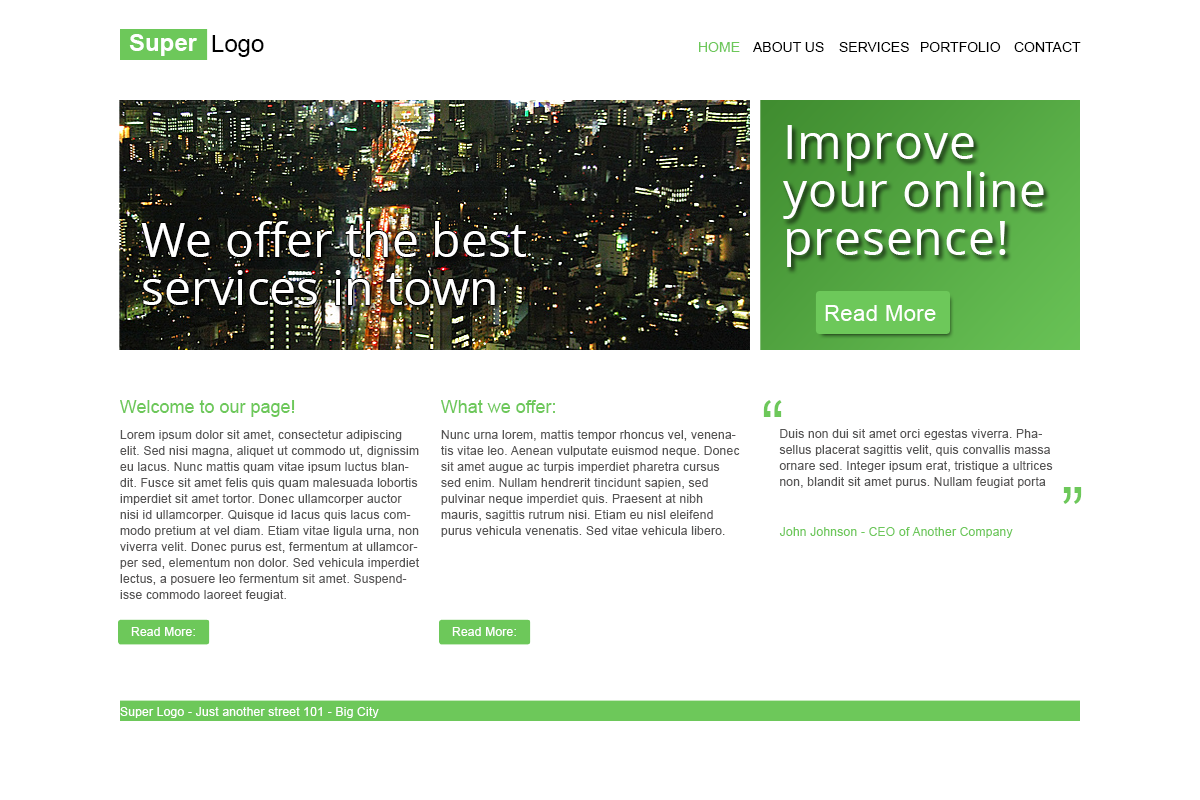
<style>
.page{position:relative;width:1200px;height:800px;background:#ffffff}
.page>*{position:absolute;margin:0}
.t1{font:24px "Arial-BoldMT";color:#ffffff}
.t2{font:24px "ArialMT";color:#000000}
.t3{font:14px "ArialMT";color:#6dc85a}
.t4{font:14px "ArialMT";color:#000000}
.t5{font:48px/48px "OpenSans";letter-spacing:0.02em;color:#ffffff}
.t6{font:48px/48px "OpenSans";color:#ffffff}
.t7{font:22px "ArialMT";letter-spacing:0.02em;color:#ffffff}
.t8{font:18px "ArialMT";color:#6dc85a}
.t9{font:70px "ArialMT";letter-spacing:0.02em;color:#6dc85a}
.t10{font:12px/16px "ArialMT";letter-spacing:0.02em;color:#565555}
.t11{font:12px "ArialMT";letter-spacing:0.02em;color:#6dc85a}
.t12{font:12px "ArialMT";letter-spacing:0.02em;color:#ffffff}
</style>
<div class="page">
<p class="t1" style="left:129px;top:34px;width:68px;height:22px">Super</p>
<p class="t2" style="left:212px;top:35px;width:52px;height:22px">Logo</p>
<p class="t3" style="left:699px;top:42px;width:41px;height:10px">HOME</p>
<p class="t4" style="left:753px;top:42px;width:71px;height:10px">ABOUT US</p>
<p class="t4" style="left:839px;top:42px;width:70px;height:10px">SERVICES</p>
<p class="t4" style="left:921px;top:42px;width:80px;height:10px">PORTFOLIO</p>
<p class="t4" style="left:1014px;top:42px;width:67px;height:10px">CONTACT</p>
<p class="t5" style="left:783px;top:125px;width:261px;height:142px">Improve your online presence!</p>
<p class="t6" style="left:141px;top:221px;width:385px;height:84px">We offer the best <br>services in town</p>
<p class="t7" style="left:825px;top:305px;width:111px;height:16px">Read More</p>
<p class="t8" style="left:120px;top:400px;width:175px;height:17px">Welcome to our page!</p>
<p class="t8" style="left:441px;top:400px;width:114px;height:13px">What we offer:</p>
<p class="t9" style="left:763px;top:400px;width:19px;height:17px">“</p>
<p class="t10" style="left:120px;top:430px;width:299px;height:171px">Lorem ipsum dolor sit amet, consectetur adipiscing elit. Sed nisi magna, aliquet ut commodo ut, dignissim eu lacus. Nunc mattis quam vitae ipsum luctus blandit. Fusce sit amet felis quis quam malesuada lobortis imperdiet sit amet tortor. Donec ullamcorper auctor nisi id ullamcorper. Quisque id lacus quis lacus commodo pretium at vel diam. Etiam vitae ligula urna, non viverra velit. Donec purus est, fermentum at ullamcorper sed, elementum non dolor. Sed vehicula imperdiet lectus, a posuere leo fermentum sit amet. Suspendisse commodo laoreet feugiat.</p>
<p class="t10" style="left:441px;top:430px;width:299px;height:107px">Nunc urna lorem, mattis tempor rhoncus vel, venenatis vitae leo. Aenean vulputate euismod neque. Donec sit amet augue ac turpis imperdiet pharetra cursus sed enim. Nullam hendrerit tincidunt sapien, sed pulvinar neque imperdiet quis. Praesent at nibh mauris, sagittis rutrum nisi. Etiam eu nisl eleifend purus vehicula venenatis. Sed vitae vehicula libero.</p>
<p class="t10" style="left:779px;top:429px;width:274px;height:59px">Duis non dui sit amet orci egestas viverra. Phasellus placerat sagittis velit, quis convallis massa ornare sed. Integer ipsum erat, tristique a ultrices non, blandit sit amet purus. Nullam feugiat porta nibh a volutpat.</p>
<p class="t9" style="left:1063px;top:487px;width:19px;height:17px">”</p>
<p class="t11" style="left:779px;top:527px;width:234px;height:11px">John Johnson - CEO of Another Company</p>
<p class="t12" style="left:131px;top:627px;width:64px;height:9px">Read More:</p>
<p class="t12" style="left:452px;top:627px;width:64px;height:9px">Read More:</p>
<p class="t12" style="left:120px;top:707px;width:259px;height:11px">Super Logo - Just another street 101 - Big City</p>
</div>
